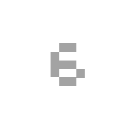
<style>
.page{position:relative;width:128px;height:128px;background:#ffffff}
.page>*{position:absolute;margin:0}
.t1{font:72px "Silkscreen";color:#a3a3a3}
</style>
<div class="page">
<p class="t1" style="left:50px;top:43px;width:35px;height:43px">6</p>
</div>
